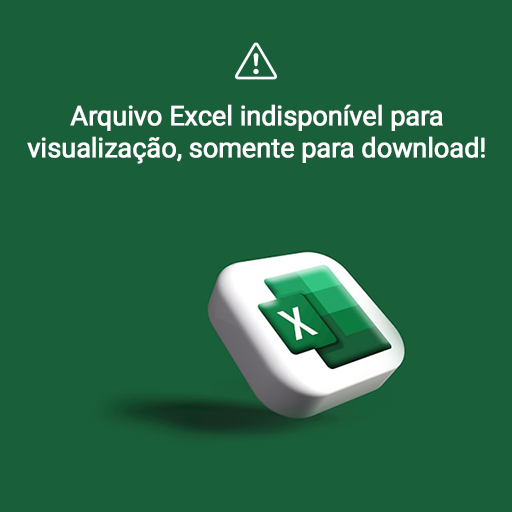
<style>
.page{position:relative;width:512px;height:512px;background:#195f3a}
.page>*{position:absolute;margin:0}
.t1{font:27px "Roboto-Regular";letter-spacing:-0.025em;color:#ffffff;font-weight:bold}
</style>
<div class="page">
<p class="t1" style="left:27px;top:104px;width:458px;height:60px;text-align:center">Arquivo Excel indisponível para<br>visualização, somente para download!</p>
</div>
